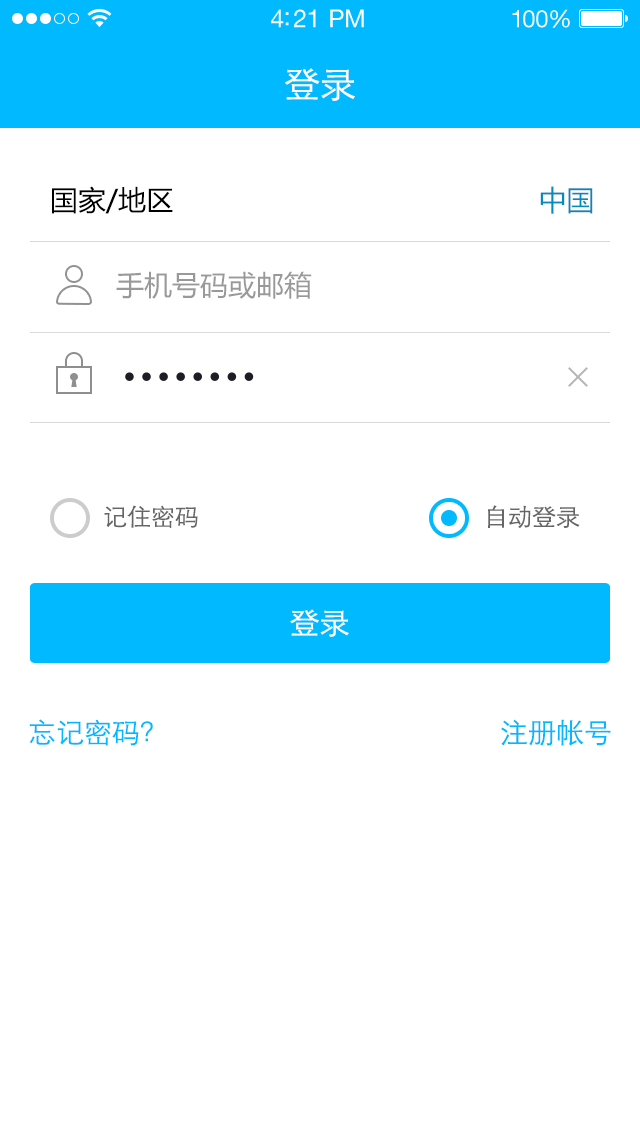
<style>
.page{position:relative;width:640px;height:1136px;background:#ffffff}
.page>*{position:absolute;margin:0}
.t1{font:25px "HelveticaNeueLTStd-Roman";letter-spacing:-0.02em;color:#ffffff}
.t2{font:24px "HelveticaNeueLTStd-Roman";letter-spacing:-0.02em;color:#ffffff}
.t3{font:36px "STXihei";color:#ffffff}
.t4{font:28px "MicrosoftYaHei";color:#000000}
.t5{font:28px "MicrosoftYaHei";color:#048bbe}
.t6{font:28px "MicrosoftYaHei";color:#999999}
.t7{font:24px "STXihei";color:#666666}
.t8{font:30px "STXihei";color:#ffffff}
.t9{font:28px "STXihei";color:#00b9ff}
</style>
<div class="page">
<p class="t1" style="left:271px;top:9px;width:93px;height:19px">4:21 PM</p>
<p class="t2" style="left:512px;top:9px;width:58px;height:19px">100%</p>
<p class="t3" style="left:285px;top:68px;width:70px;height:33px">登录</p>
<p class="t4" style="left:52px;top:186px;width:541px;height:28px">国家/地区                                            <span class="t5">中国</span></p>
<p class="t6" style="left:116px;top:271px;width:196px;height:28px">手机号码或邮箱</p>
<p class="t7" style="left:104px;top:505px;width:94px;height:23px">记住密码</p>
<p class="t7" style="left:488px;top:505px;width:92px;height:23px">自动登录</p>
<p class="t8" style="left:290px;top:609px;width:59px;height:28px">登录</p>
<p class="t9" style="left:29px;top:719px;width:124px;height:27px">忘记密码？</p>
<p class="t9" style="left:501px;top:719px;width:110px;height:27px">注册帐号</p>
</div>
